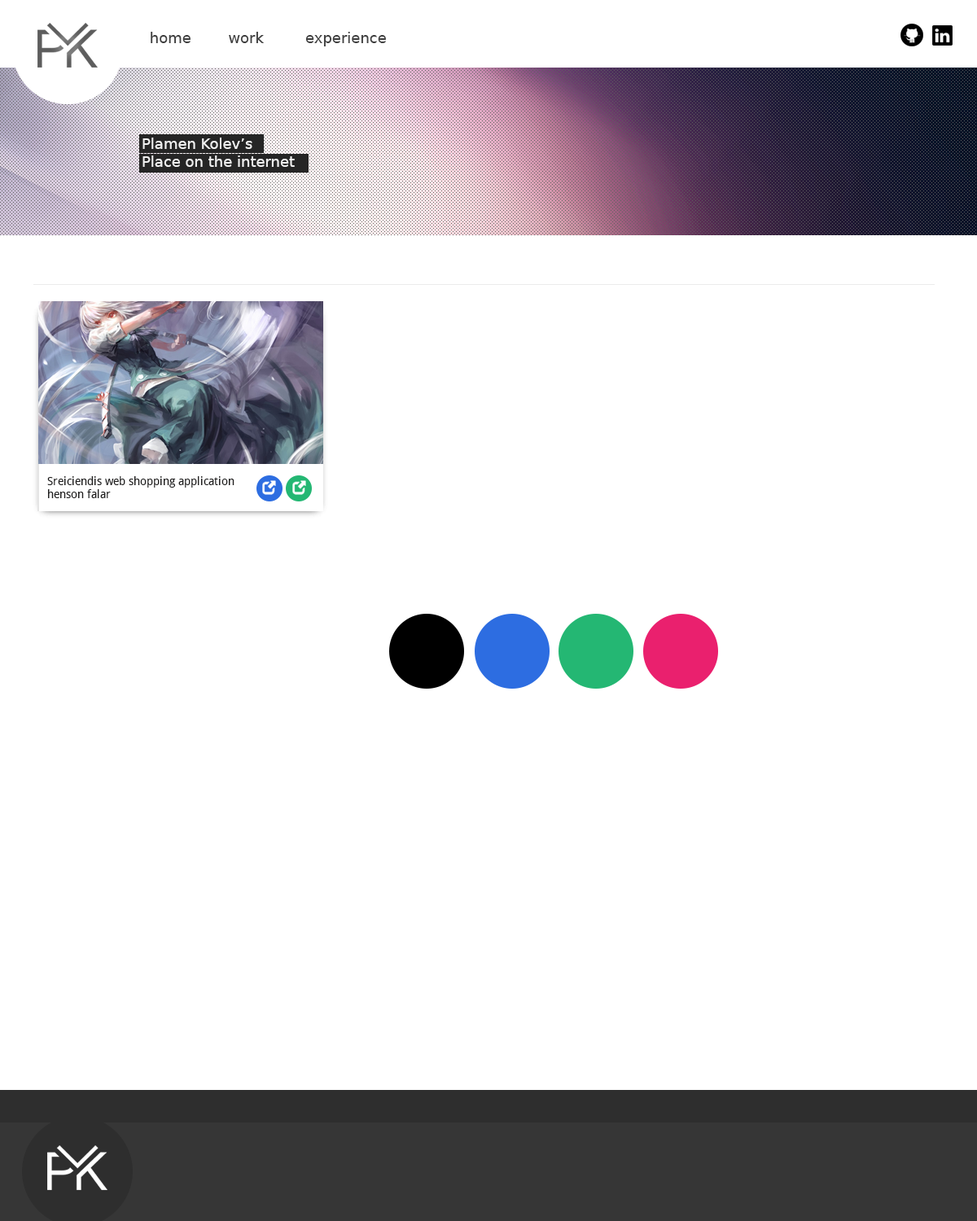
<style>
.page{position:relative;width:977px;height:1221px;background:#ffffff}
.page>*{position:absolute;margin:0}
.t1{font:14.7px "DejaVuSans";color:#404040}
.t2{font:14.7px "DejaVuSans";color:#f0f0f0}
.t3{font:11.4px "DroidSans";color:#1f1e1e}
</style>
<div class="page">
<p class="t1" style="left:151px;top:32px;width:39px;height:11px">home</p>
<p class="t1" style="left:229px;top:32px;width:35px;height:11px">work</p>
<p class="t1" style="left:305px;top:32px;width:81px;height:14px">experience</p>
<p class="t2" style="left:142px;top:138px;width:153px;height:29px;text-align:right">Plamen Kolev’s<br>Place on the internet</p>
<p class="t3" style="left:47px;top:476px;width:187px;height:22px">Sreiciendis web shopping application henson falar</p>
</div>
